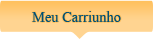
<style>
.page{position:relative;width:153px;height:39px;background:#ffd491}
.page>*{position:absolute;margin:0}
.t1{font:18px "Aparajita";color:#005075}
</style>
<div class="page">
<p class="t1" style="left:32px;top:11px;width:89px;height:11px">Meu Carriunho</p>
</div>
